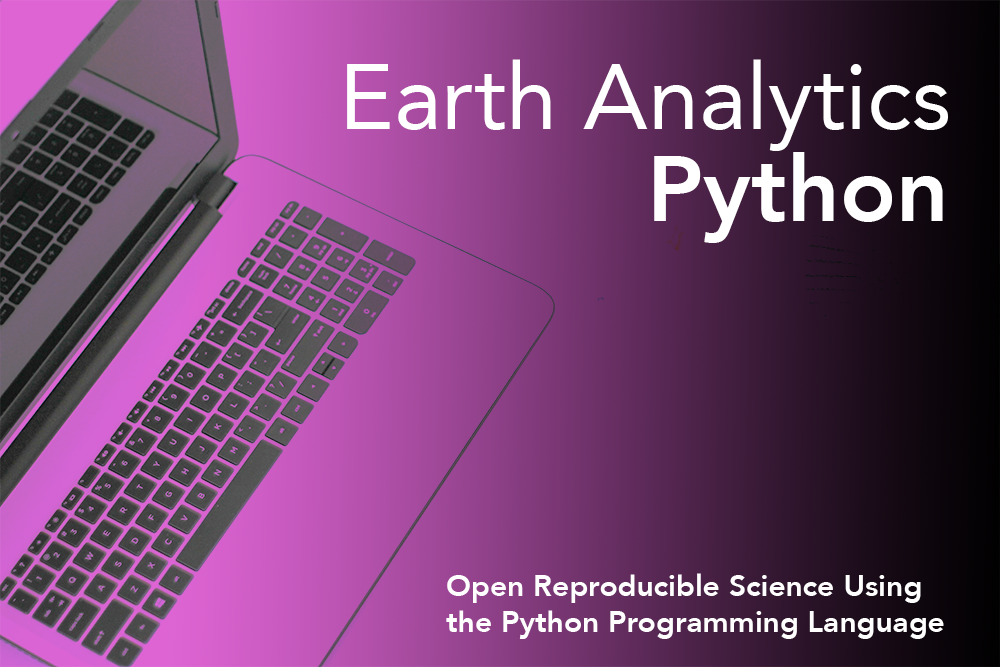
<style>
.page{position:relative;width:1000px;height:667px}
.page>*{position:absolute;margin:0}
.t1{font:92px "Avenir-Roman";color:#ffffff}
.t2{font:92px "Avenir-Heavy";color:#ffffff}
.t3{font:30px "Avenir-Heavy";color:#ffffff}
</style>
<div class="page">
<p class="t1" style="left:347px;top:59px;width:601px;height:92px">Earth Analytics</p>
<p class="t2" style="left:654px;top:152px;width:289px;height:91px">Python</p>
<p class="t3" style="left:446px;top:573px;width:498px;height:66px">Open Reproducible Science Using <br>the Python Programming Language</p>
</div>
